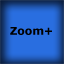
<style>
.page{position:relative;width:64px;height:64px;background:#296ee0}
.page>*{position:absolute;margin:0}
.t1{font:10.8px "Verdana-Bold";color:#000000}
</style>
<div class="page">
<p class="t1" style="left:10px;top:27px;width:42px;height:8px">Zoom+</p>
</div>
